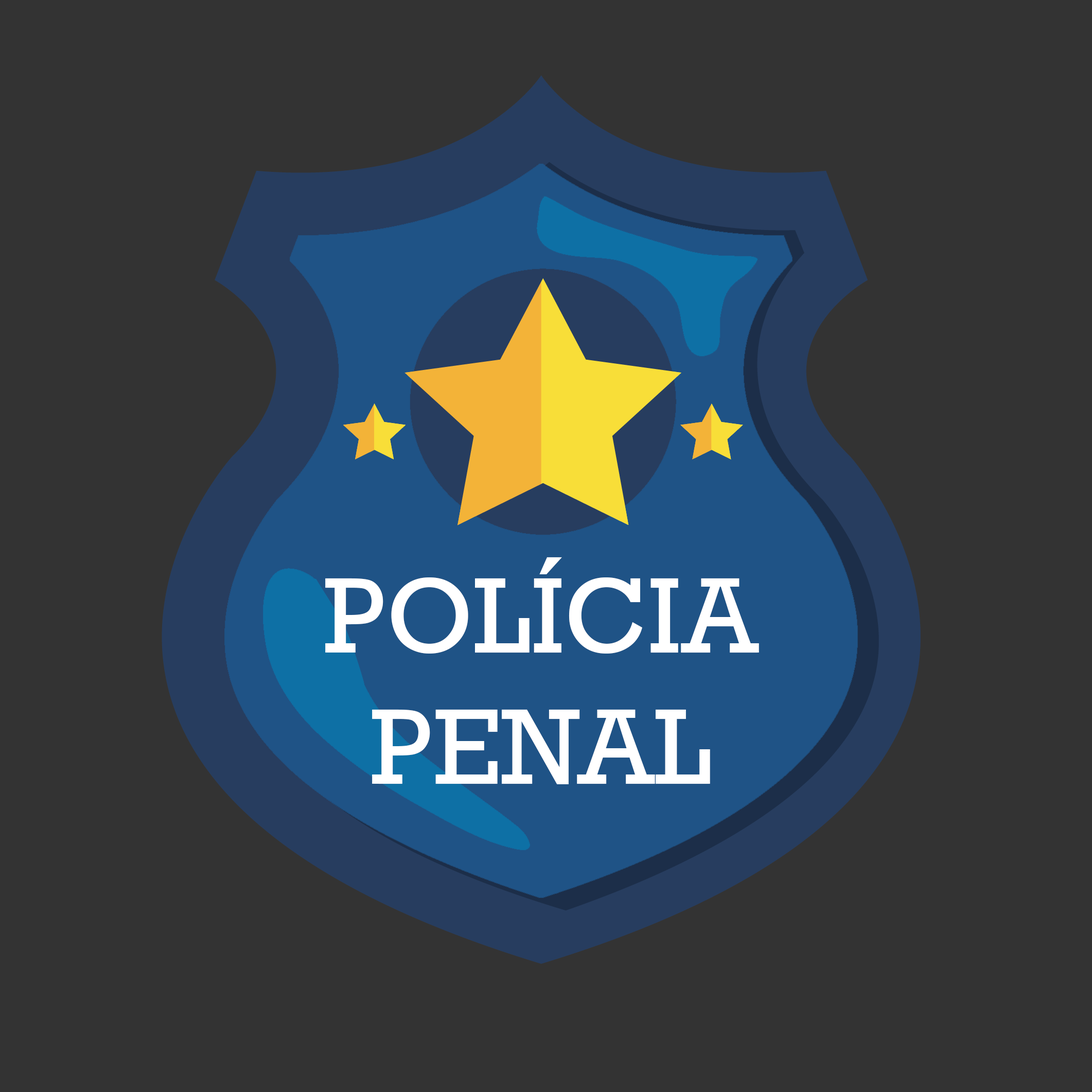
<style>
.page{position:relative;width:1092px;height:1092px;background:#333333}
.page>*{position:absolute;margin:0}
.t1{font:109.3px "Rockwell";color:#ffffff}
</style>
<div class="page">
<p class="t1" style="left:325px;top:557px;width:434px;height:227px;text-align:center">POLÍCIA<br>PENAL</p>
</div>
